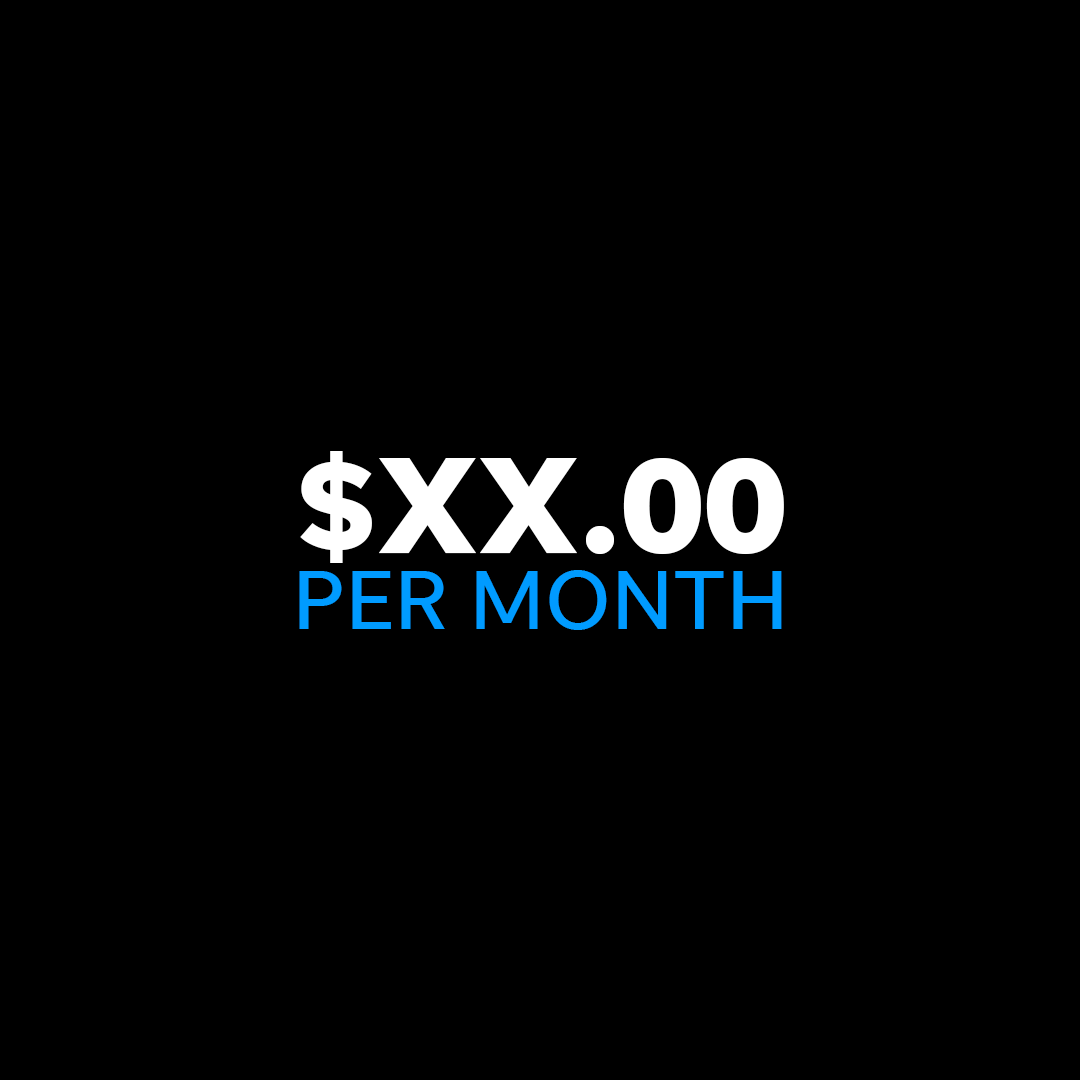
<style>
.page{position:relative;width:1080px;height:1080px;background:#000000}
.page>*{position:absolute;margin:0}
.t1{font:140px "UnifySans-Bold";color:#ffffff;text-transform:uppercase}
.t2{font:86px "UnifySans-Regular";color:#009bff;text-transform:uppercase}
</style>
<div class="page">
<p class="t1" style="left:300px;top:451px;width:484px;height:112px">$XX.00</p>
<p class="t2" style="left:299px;top:570px;width:483px;height:60px">PER MONTH</p>
</div>
